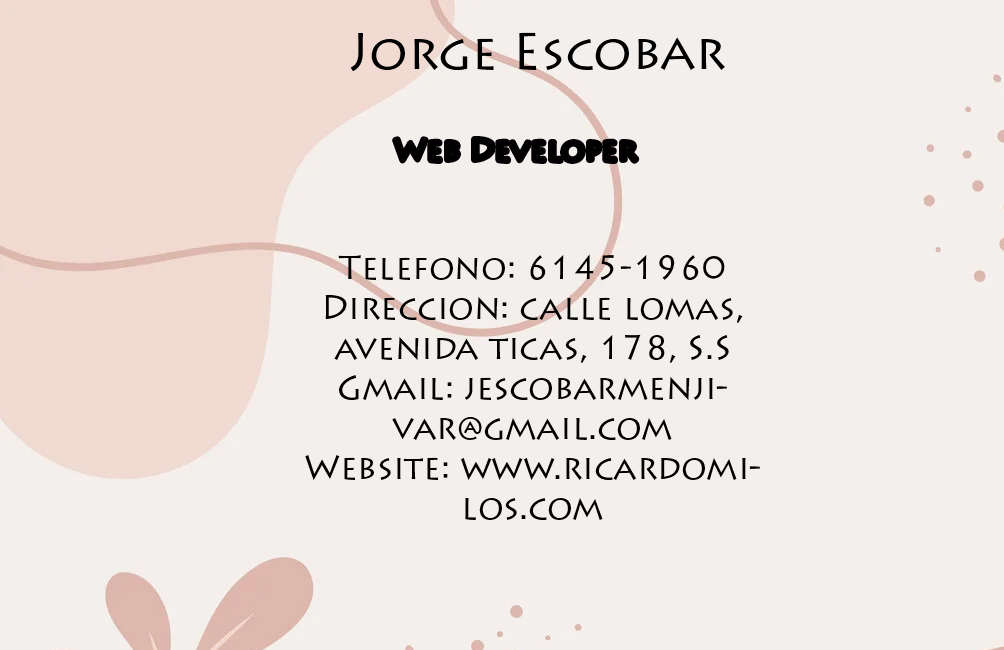
<style>
.page{position:relative;width:1004px;height:650px;background:#f3efec}
.page>*{position:absolute;margin:0}
.t1{font:50px "LithosPro-Regular";color:#000000}
.t2{font:29.2px "LithosPro-Regular";color:#000000;scale:1.05 1}
.t3{font:33.3px "LithosPro-Regular";color:#000000}
</style>
<div class="page">
<p class="t1" style="left:350px;top:32px;width:375px;height:39px">Jorge Escobar</p>
<p class="t2" style="left:395px;top:139px;width:242px;height:22px">Web Developer</p>
<p class="t3" style="left:305px;top:254px;width:455px;height:266px;text-align:center">Telefono: 6145-1960<br>Direccion: calle lomas, avenida ticas, 178, S.S<br>Gmail: jescobarmenjivar@gmail.com<br>Website: www.ricardomilos.com</p>
</div>
